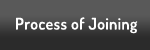
<style>
.page{position:relative;width:150px;height:50px;background:#595959}
.page>*{position:absolute;margin:0}
.t1{font:16px "TerminalDosis-SemiBold";letter-spacing:0.025em;color:#ffffff}
</style>
<div class="page">
<p class="t1" style="left:16px;top:17px;width:122px;height:17px">Process of Joining</p>
</div>
